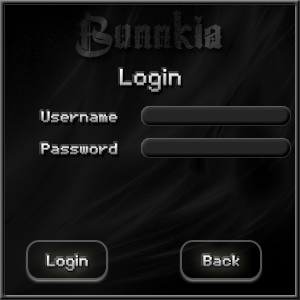
<style>
.page{position:relative;width:300px;height:300px}
.page>*{position:absolute;margin:0}
.t1{font:48px "TheCenturion";color:#202020;font-weight:bold}
.t2{font:36px "MinimalFont5x7";font-weight:bold}
.t3{font:24px "MinimalFont5x7";font-weight:bold}
</style>
<div class="page">
<p class="t1" style="left:75px;top:10px;width:148px;height:49px">Bunnkia</p>
<p class="t2" style="left:120px;top:69px;width:61px;height:23px">Login</p>
<p class="t3" style="left:41px;top:111px;width:77px;height:12px">Username</p>
<p class="t3" style="left:41px;top:143px;width:77px;height:12px">Password</p>
<p class="t3" style="left:47px;top:255px;width:41px;height:16px">Login</p>
<p class="t3" style="left:203px;top:255px;width:37px;height:12px">Back</p>
</div>
